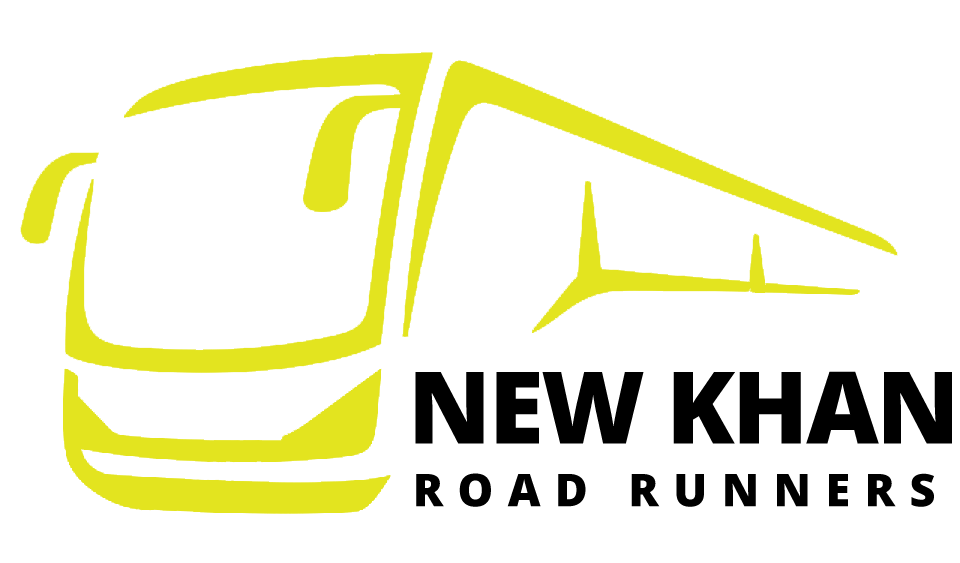
<style>
.page{position:relative;width:960px;height:563px;background:#ffffff}
.page>*{position:absolute;margin:0}
.t1{font:100px "OpenSans-ExtraBold";letter-spacing:-0.025em;color:#000000}
.t2{font:45px "OpenSans-ExtraBold";letter-spacing:0.32em;color:#000000}
</style>
<div class="page">
<p class="t1" style="left:415px;top:371px;width:537px;height:73px">NEW KHAN</p>
<p class="t2" style="left:416px;top:473px;width:518px;height:34px">ROAD RUNNERS</p>
</div>
